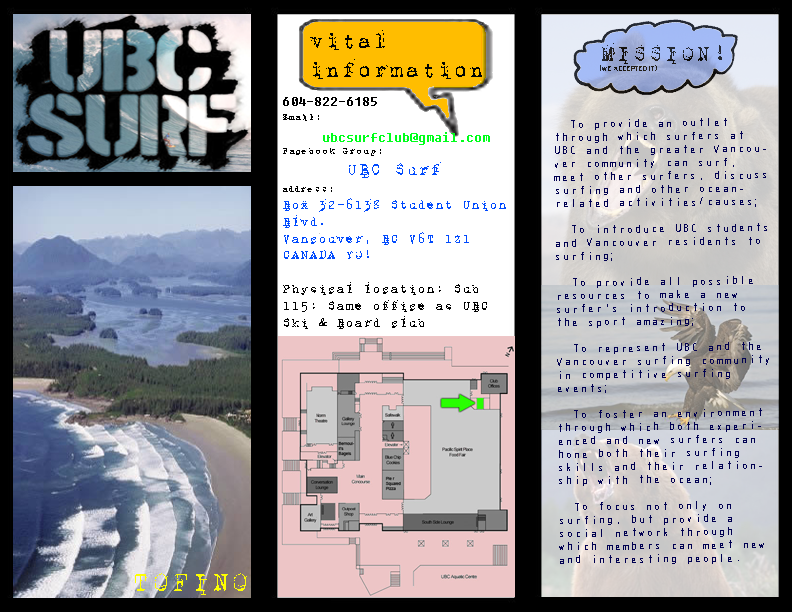
<style>
.page{position:relative;width:792px;height:612px}
.page>*{position:absolute;margin:0}
.t1{font:8px "SWIsop2"}
.t2{font:24px "1942report"}
.t3{font:14px "1942report";color:#004afe}
.t4{font:12px "Fixedsys";color:#000000}
.t5{font:10px "1942report";color:#000000}
.t6{font:18px "Fixedsys";color:#00ff1b}
.t7{font:18px "1942report";color:#004afe}
.t8{font:14px "1942report";color:#000000}
.t9{font:11px "SWLink";color:#000051}
.t10{font:11px "ArialMT";color:#000051}
.t11{font:30px "1942report";color:#feff00}
</style>
<div class="page">
<p class="t1" style="left:600px;top:43px;width:122px;height:28px"><span class="t2">MISSION!<br></span>(WE ACCEPTED IT)</p>
<p class="t3" style="left:283px;top:97px;width:223px;height:232px"><span class="t4"><br>604-822-6185<br></span><span class="t5">Email: <br>     </span><span class="t6">ubcsurfclub@gmail.com<br></span><span class="t5">Facebook Group:<br>        </span><span class="t7">UBC Surf<br></span><span class="t5">address: <br></span>Box 32-6138 Student Union Blvd. <br>Vancouver, BC V6T 1Z1<br>CANADA YO!<br><span class="t8"><br>Physical location: Sub 115: Same office as UBC Ski &amp; Board club</span></p>
<p class="t9" style="left:554px;top:118px;width:215px;height:446px;rotate:-1deg">• To provide an outlet through which surfers at UBC and the greater Vancouver community can surf, meet other surfers, discuss surfing and other ocean-related activities/causes<span class="t10">;<br><br></span>• To introduce UBC students and Vancouver residents to surfing<span class="t10">;<br><br></span>• To provide all possible resources to make a new surfer’s introduction to the sport amazing<span class="t10">;<br></span><br>• To represent UBC and the Vancouver surfing community in competitive surfing events<span class="t10">;<br></span><br>• To foster an environment through which both experienced and new surfers can hone both their surfing skills and their relationship with the ocean<span class="t10">;<br></span><br>• To focus not only on surfing, but provide a social network through which members can meet new and interesting people.</p>
<p class="t11" style="left:135px;top:573px;width:112px;height:22px">TOFINO</p>
</div>
